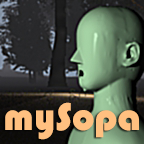
<style>
.page{position:relative;width:144px;height:144px}
.page>*{position:absolute;margin:0}
.t1{font:40px "Bauhaus93";color:#ffc080}
</style>
<div class="page">
<p class="t1" style="left:5px;top:102px;width:134px;height:38px">mySopa</p>
</div>
